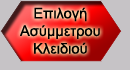
<style>
.page{position:relative;width:130px;height:70px;background:#c6c3c6}
.page>*{position:absolute;margin:0}
.t1{font:14.7px "ArialMT";color:#000000}
</style>
<div class="page">
<p class="t1" style="left:20px;top:7px;width:80px;height:47px;text-align:center">Επιλογή<br>Ασύμμετρου<br>Κλειδιού</p>
</div>
